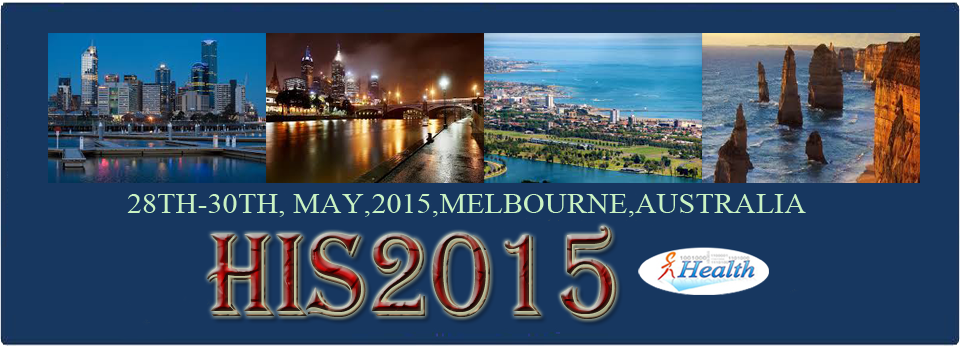
<style>
.page{position:relative;width:960px;height:347px;background:#173760}
.page>*{position:absolute;margin:0}
.t1{font:28.3px "TimesNewRomanPSMT";color:#c9f2c3;scale:1.07 1}
.t2{font:122.9px "Algerian";scale:0.87 1}
</style>
<div class="page">
<p class="t1" style="left:127px;top:194px;width:679px;height:23px">28TH-30TH, MAY,2015,MELBOURNE,AUSTRALIA</p>
<p class="t2" style="left:207px;top:226px;width:410px;height:93px">HIS2015</p>
</div>
